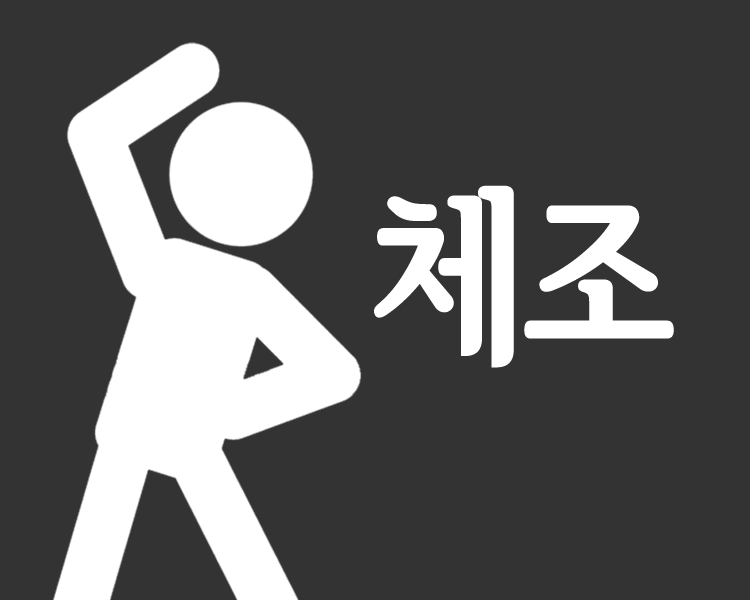
<style>
.page{position:relative;width:750px;height:600px;background:#333333}
.page>*{position:absolute;margin:0}
.t1{font:190px "SeoulHangangCBL";color:#ffffff}
</style>
<div class="page">
<p class="t1" style="left:374px;top:185px;width:300px;height:183px">체조</p>
</div>
